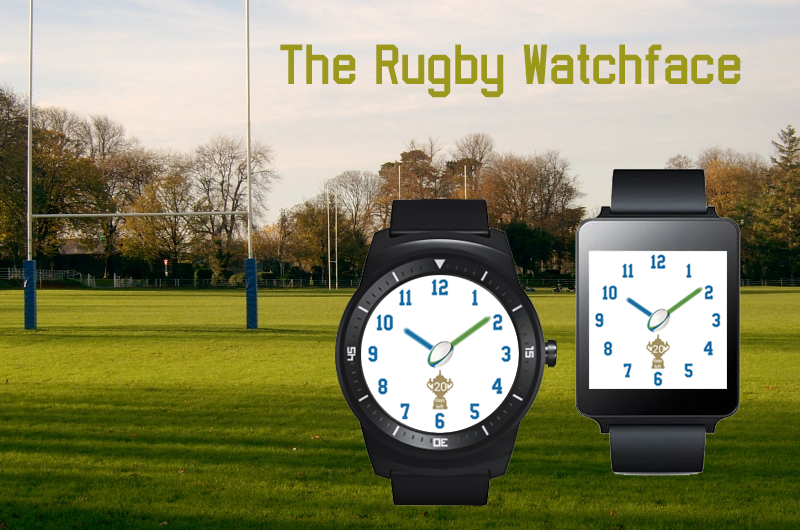
<style>
.page{position:relative;width:800px;height:530px}
.page>*{position:absolute;margin:0}
.t1{font:60px "SportsJersey";color:#9c981b}
</style>
<div class="page">
<p class="t1" style="left:280px;top:44px;width:461px;height:54px">The Rugby Watchface</p>
</div>
